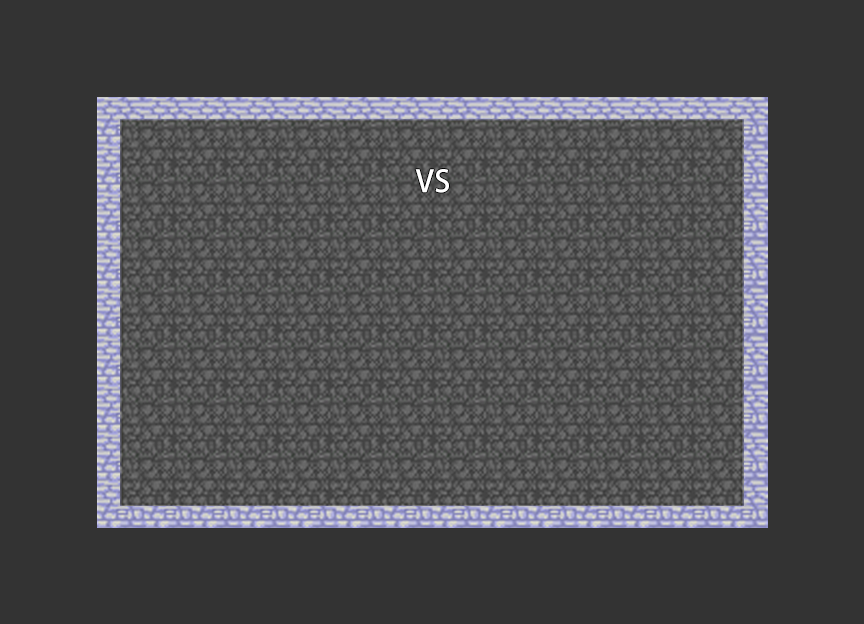
<style>
.page{position:relative;width:864px;height:624px;background:#333333}
.page>*{position:absolute;margin:0}
.t1{font:30px "AdobeHeitiStd-Regular";color:#ffffff}
</style>
<div class="page">
<p class="t1" style="left:415px;top:169px;width:34px;height:24px">VS</p>
</div>
